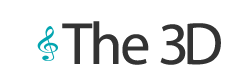
<style>
.page{position:relative;width:230px;height:80px;background:#ffffff}
.page>*{position:absolute;margin:0}
.t1{font:60px "FeenaCasual";letter-spacing:-0.04em;color:#333333}
.t2{font:60px "FeenaCasual";color:#333333}
</style>
<div class="page">
<p class="t1" style="left:62px;top:21px;width:124px;height:44px">The 3</p>
<p class="t2" style="left:187px;top:23px;width:34px;height:42px">D</p>
</div>
